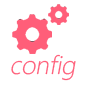
<style>
.page{position:relative;width:87px;height:89px;background:#ffffff}
.page>*{position:absolute;margin:0}
.t1{font:25.6px "SegoeUI-Light";color:#ff5e79;font-style:italic}
</style>
<div class="page">
<p class="t1" style="left:11px;top:54px;width:65px;height:27px">config</p>
</div>
